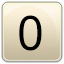
<style>
.page{position:relative;width:64px;height:64px}
.page>*{position:absolute;margin:0}
.t1{font:48px "ArialMT";color:#000000}
</style>
<div class="page">
<p class="t1" style="left:19px;top:15px;width:23px;height:36px">0</p>
</div>
